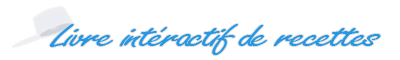
<style>
.page{position:relative;width:400px;height:60px;background:#ffffff}
.page>*{position:absolute;margin:0}
.t1{font:36px "FreestyleScript-Regular";letter-spacing:-0.06em;color:#2697e3;scale:1.67 1}
</style>
<div class="page">
<p class="t1" style="left:49px;top:24px;width:332px;height:31px">Livre intéractif de recettes</p>
</div>
